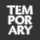
<style>
.page{position:relative;width:40px;height:40px;background:#333333}
.page>*{position:absolute;margin:0}
.t1{font:12px/10px "AmiraParadiso";color:#ffffff}
</style>
<div class="page">
<p class="t1" style="left:7px;top:6px;width:26px;height:28px;text-align:center">TEM<br>POR<br>ARY</p>
</div>
